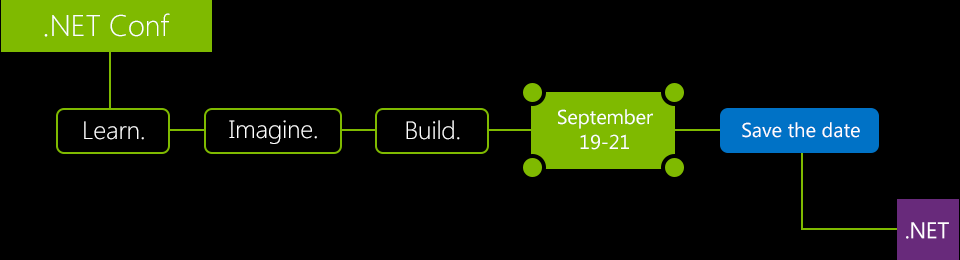
<style>
.page{position:relative;width:960px;height:260px;background:#000000}
.page>*{position:absolute;margin:0}
.t1{font:30px "SegoeUI-Light";color:#ffffff}
.t2{font:20px/25px "SegoeUI";color:#ffffff}
.t3{font:25px "SegoeUI-Light";color:#ffffff}
.t4{font:20px "SegoeUI";color:#ffffff}
</style>
<div class="page">
<p class="t1" style="left:44px;top:13px;width:126px;height:24px">.NET Conf</p>
<p class="t2" style="left:558px;top:109px;width:95px;height:41px;text-align:center">September<br>19-21</p>
<p class="t3" style="left:84px;top:121px;width:60px;height:19px">Learn.</p>
<p class="t3" style="left:229px;top:120px;width:88px;height:24px">Imagine.</p>
<p class="t3" style="left:406px;top:120px;width:54px;height:20px">Build.</p>
<p class="t4" style="left:742px;top:122px;width:118px;height:16px">Save the date</p>
</div>
